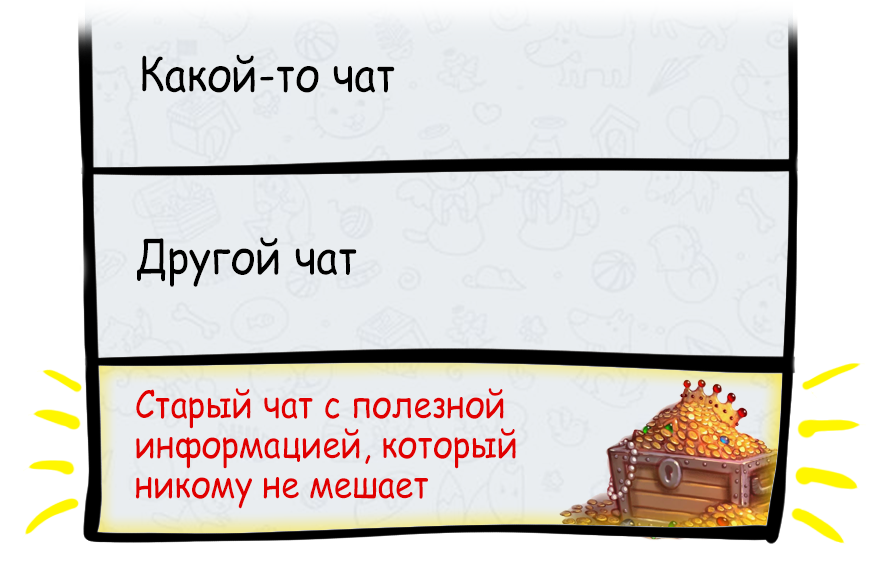
<style>
.page{position:relative;width:871px;height:566px;background:#e9edf0}
.page>*{position:absolute;margin:0}
.t1{font:47.1px "ComicSansMS";color:#000000;scale:0.88 1}
.t2{font:37.7px "ComicSansMS";color:#e10000;scale:0.88 1}
</style>
<div class="page">
<p class="t1" style="left:142px;top:54px;width:253px;height:39px">Какой-то чат</p>
<p class="t1" style="left:137px;top:237px;width:220px;height:50px">Другой чат</p>
<p class="t2" style="left:136px;top:388px;width:380px;height:121px">Cтарый чат с полезной информацией, который никому не мешает</p>
</div>
